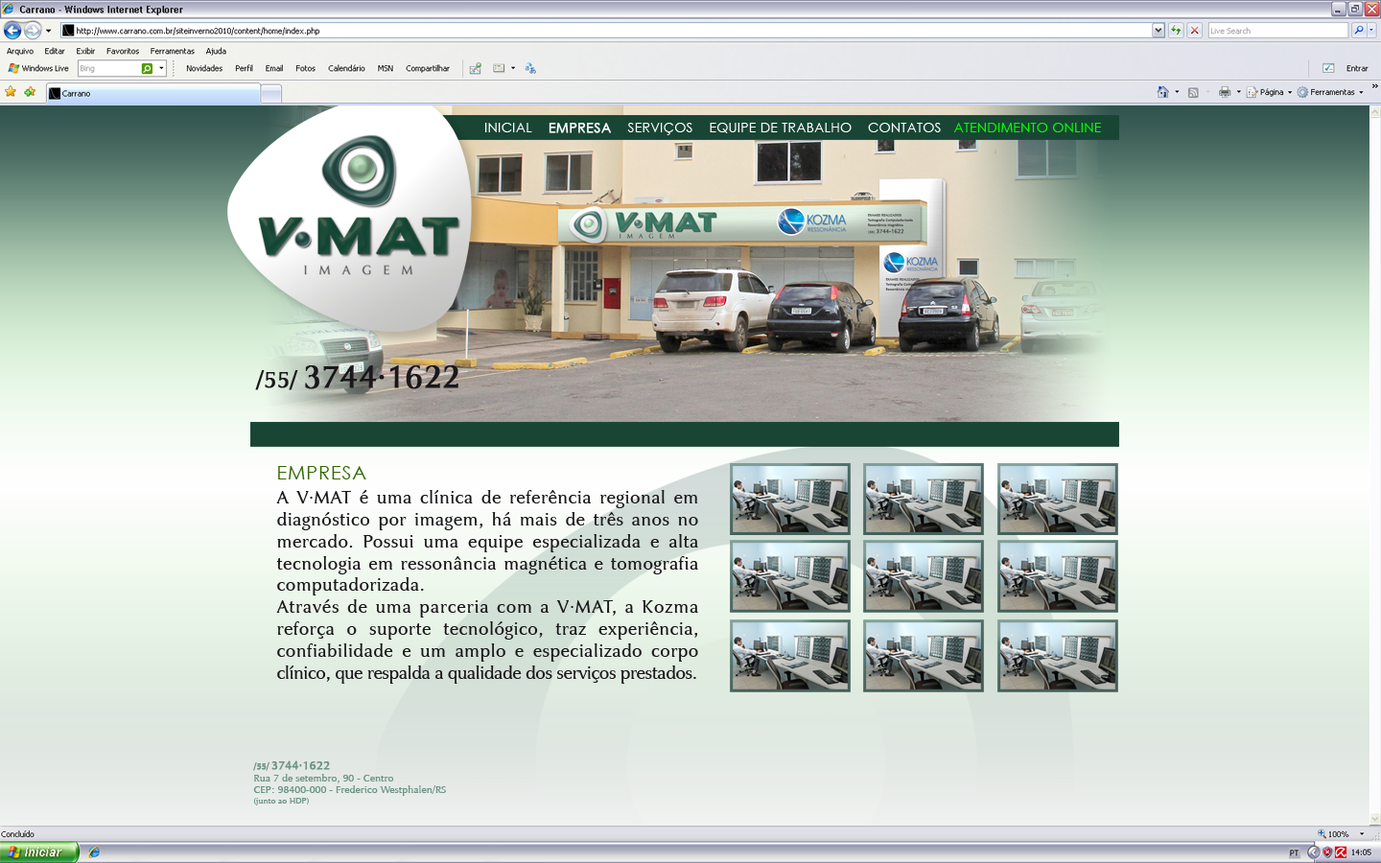
<style>
.page{position:relative;width:1381px;height:863px}
.page>*{position:absolute;margin:0}
.t1{font:13px "CenturyGothic";letter-spacing:0.035em;color:#ffffff}
.t2{font:13px "CenturyGothic";letter-spacing:0.035em;color:#ffffff;font-weight:bold}
.t3{font:13px "CenturyGothic";letter-spacing:0.035em;color:#06fe00}
.t4{font:31.6px "JaguarJCBook";color:#1a171b;font-weight:bold}
.t5{font:22.6px "JaguarJCBook";color:#1a171b;font-weight:bold}
.t6{font:19.4px "CenturyGothic";letter-spacing:0.035em;color:#336600}
.t7{font:18px/22px "JaguarJCBook";letter-spacing:0.02em;color:#1a171b}
.t8{font:18px/22px "JaguarJCBook";letter-spacing:0.04em;color:#1a171b}
.t9{font:18px/22px "JaguarJCBook";letter-spacing:-0.025em;color:#1a171b}
.t10{font:10.1px "JaguarJCBook";color:#6d9486}
.t11{font:8.4px "JaguarJCBook";color:#6d9486;font-weight:bold}
.t12{font:11.8px "JaguarJCBook";color:#6d9486;font-weight:bold}
.t13{font:8.4px "JaguarJCBook";color:#6d9486}
</style>
<div class="page">
<p class="t1" style="left:485px;top:123px;width:616px;height:12px">INICIAL    <span class="t2">EMPRESA</span>    SERVIÇOS    EQUIPE DE TRABALHO    CONTATOS   <span class="t3">ATENDIMENTO ONLINE</span></p>
<p class="t4" style="left:255px;top:365px;width:204px;height:25px"><span class="t5">/55/ </span>3744·1622</p>
<p class="t6" style="left:278px;top:466px;width:88px;height:14px">EMPRESA</p>
<p class="t7" style="left:276px;top:490px;width:422px;height:194px;text-align:justify">A V·MAT é uma clínica de referência regional em diagnóstico por imagem, há mais de três anos no mercado. Possui uma equipe especializada e alta tecnologia em ressonância magnética e tomografia computadorizada.<br><span class="t8">Através de uma parceria com a V·MAT, a Kozma </span>reforça o suporte tecnológico, traz experiência, confiabilidade e um amplo e especializado corpo <span class="t9">clínico, que respalda a qualidade dos serviços prestados.</span></p>
<p class="t10" style="left:253px;top:761px;width:193px;height:45px"><span class="t11">/55/ </span><span class="t12">3744·1622<br></span>Rua 7 de setembro, 90 - Centro<br>CEP: 98400-000 - Frederico Westphalen/RS<br><span class="t13">(junto ao HDP)</span></p>
</div>
